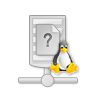
<style>
.page{position:relative;width:96px;height:96px;background:#ffffff}
.page>*{position:absolute;margin:0}
.t1{font:18px "Helvetica";color:#777777;font-weight:bold;scale:0.96 1}
</style>
<div class="page">
<p class="t1" style="left:43px;top:33px;width:9px;height:14px">?</p>
</div>
